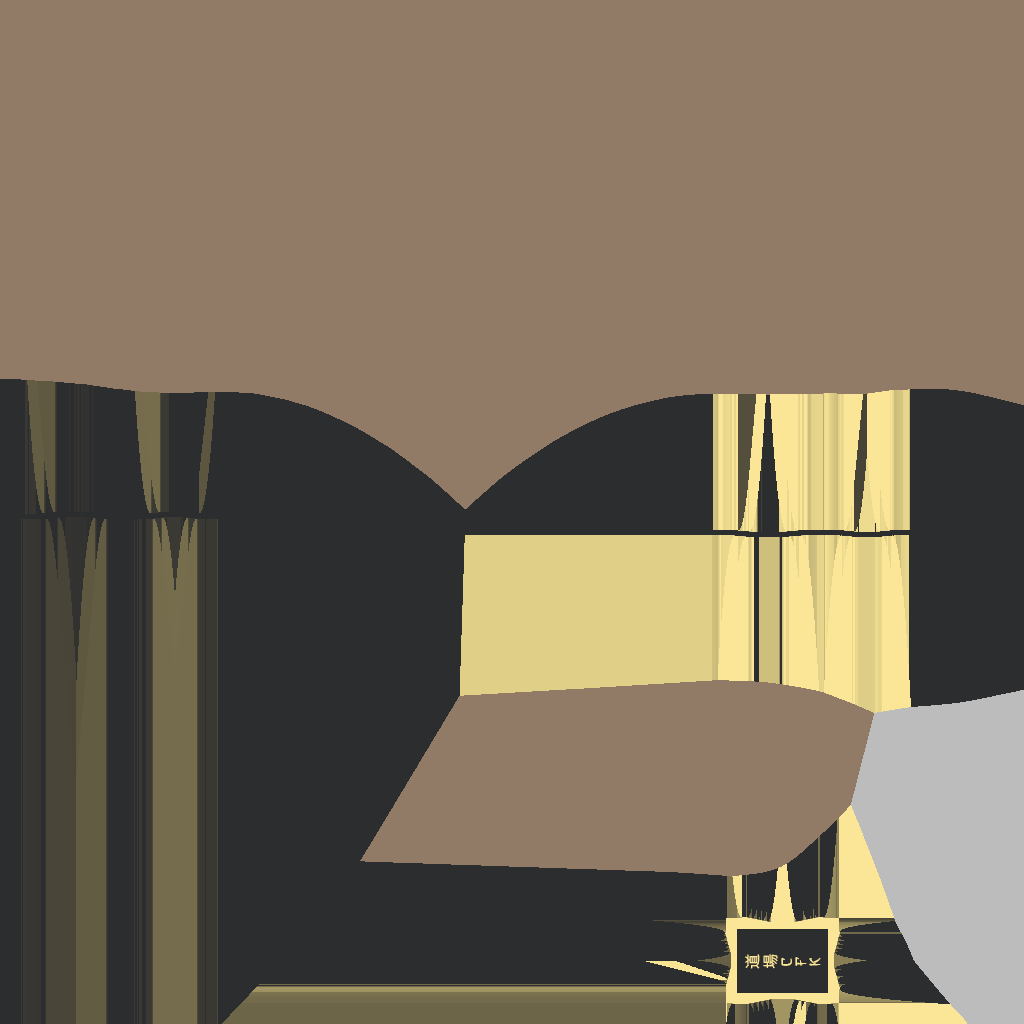
<style>
.page{position:relative;width:1024px;height:1024px;background:#917b67}
.page>*{position:absolute;margin:0}
.t1{font:15px "KozGoPr6N-Regular";color:#fae696}
.t2{font:15px/14px "aAsianHiro";color:#fae696}
</style>
<div class="page">
<p class="t1" style="left:745px;top:954px;width:33px;height:15px;text-align:center;rotate:-90deg">道<br>場</p>
<p class="t2" style="left:781px;top:957px;width:40px;height:9px;text-align:center;rotate:-90deg">C<br>F<br>K</p>
</div>
